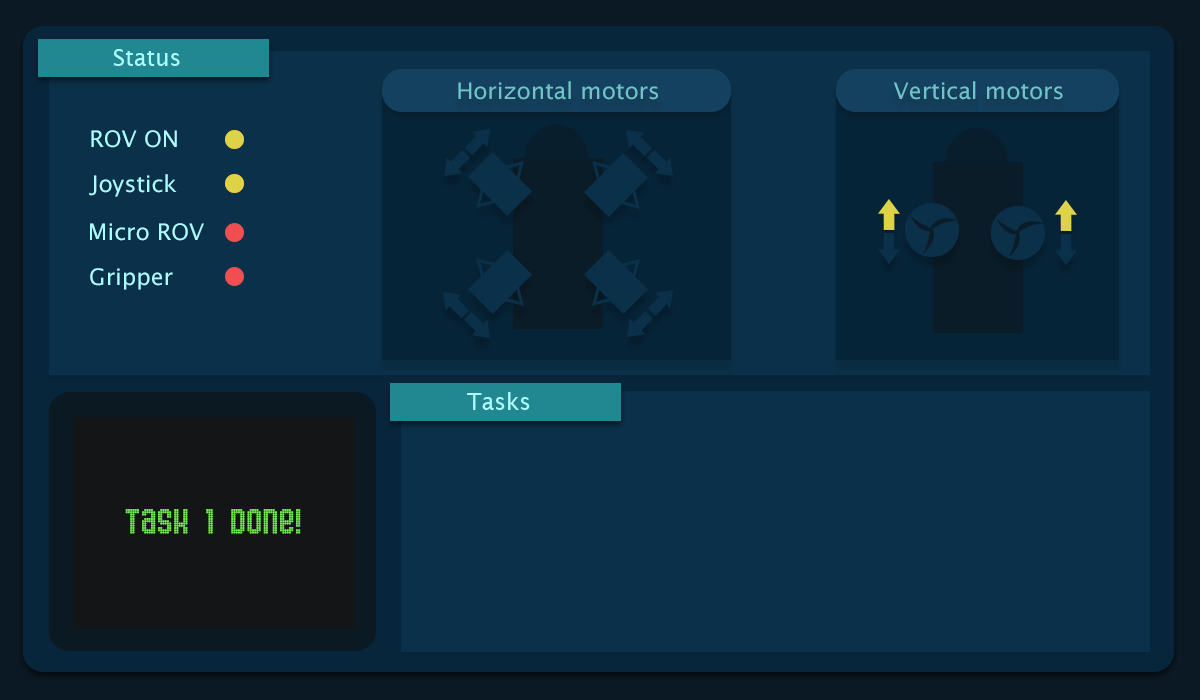
<style>
.page{position:relative;width:1200px;height:700px;background:#0b3049}
.page>*{position:absolute;margin:0}
.t1{font:23px "LucidaSans";color:#abfcff}
.t2{font:23px "LucidaSans";color:#6fc3c9}
.t3{font:31.3px "Gas";color:#70f04e}
</style>
<div class="page">
<p class="t1" style="left:113px;top:49px;width:67px;height:17px">Status</p>
<p class="t2" style="left:458px;top:81px;width:200px;height:19px">Horizontal motors</p>
<p class="t2" style="left:894px;top:81px;width:169px;height:19px">Vertical motors</p>
<p class="t1" style="left:91px;top:130px;width:86px;height:18px">ROV ON</p>
<p class="t1" style="left:89px;top:174px;width:88px;height:23px">Joystick</p>
<p class="t1" style="left:90px;top:223px;width:114px;height:18px">Micro ROV</p>
<p class="t1" style="left:90px;top:268px;width:83px;height:22px">Gripper</p>
<p class="t1" style="left:467px;top:392px;width:63px;height:18px">Tasks</p>
<p class="t3" style="left:125px;top:509px;width:176px;height:25px">!Task 1 done</p>
</div>
